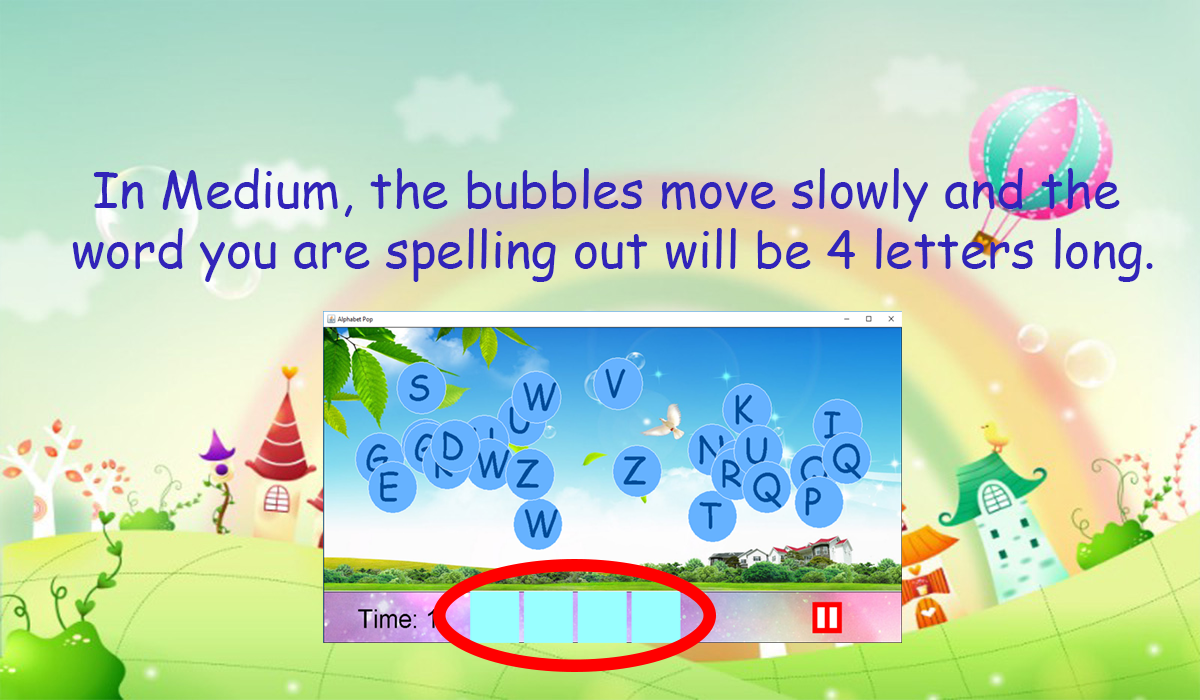
<style>
.page{position:relative;width:1200px;height:700px}
.page>*{position:absolute;margin:0}
.t1{font:12px "ComicSansMS";color:#3124b9}
</style>
<div class="page">
<p class="t1" style="left:72px;top:168px;width:1081px;height:114px;text-align:center">In Medium, the bubbles move slowly and the <br>word you are spelling out will be 4 letters long.</p>
</div>
